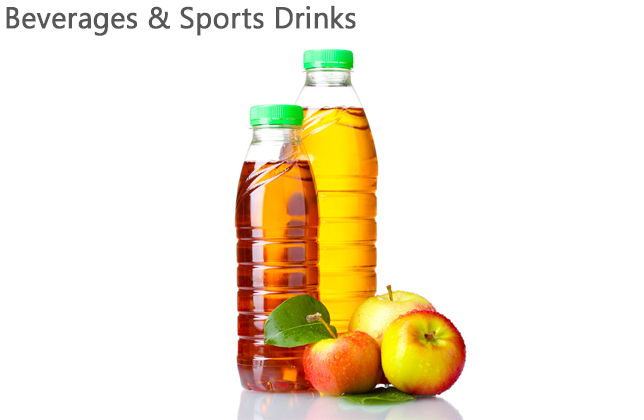
<style>
.page{position:relative;width:644px;height:420px;background:#ffffff}
.page>*{position:absolute;margin:0}
.t1{font:30px "Gadugi";color:#575757;font-weight:bold;scale:0.95 1}
</style>
<div class="page">
<p class="t1" style="left:6px;top:5px;width:350px;height:31px">Beverages &amp; Sports Drinks</p>
</div>
